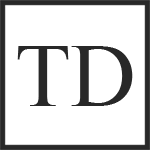
<style>
.page{position:relative;width:150px;height:150px;background:#ffffff}
.page>*{position:absolute;margin:0}
.t1{font:90.7px "TimesNewRomanPSMT";color:#282828}
</style>
<div class="page">
<p class="t1" style="left:17px;top:46px;width:116px;height:60px">TD</p>
</div>
